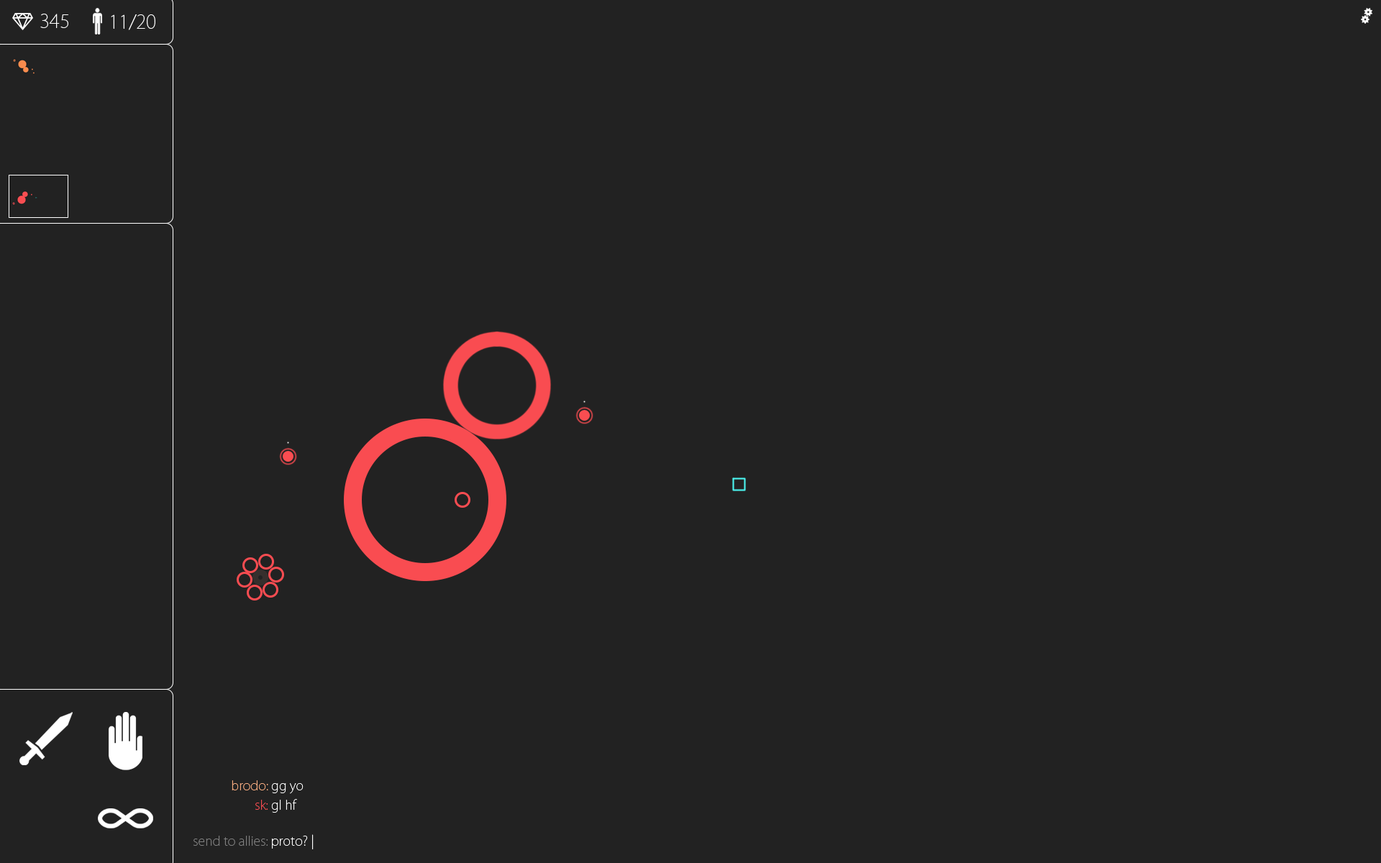
<style>
.page{position:relative;width:1381px;height:863px;background:#222222}
.page>*{position:absolute;margin:0}
.t1{font:18.7px "KozGoPro-ExtraLight";color:#ffffff}
.t2{font:12.9px "KozGoPro-ExtraLight";color:#f9ad81}
.t3{font:12.9px "KozGoPro-ExtraLight";color:#ffffff}
.t4{font:12.9px "KozGoPro-ExtraLight";color:#f94c51}
.t5{font:12.9px "KozGoPro-ExtraLight";color:#808080}
</style>
<div class="page">
<p class="t1" style="left:40px;top:14px;width:28px;height:14px">345</p>
<p class="t1" style="left:111px;top:14px;width:44px;height:16px">11/20</p>
<p class="t2" style="left:232px;top:781px;width:72px;height:13px">brodo: <span class="t3">gg yo</span></p>
<p class="t3" style="left:255px;top:799px;width:42px;height:14px"><span class="t4">sk: </span>gl hf</p>
<p class="t5" style="left:194px;top:835px;width:120px;height:15px">send to allies: <span class="t3">proto? |</span></p>
</div>
